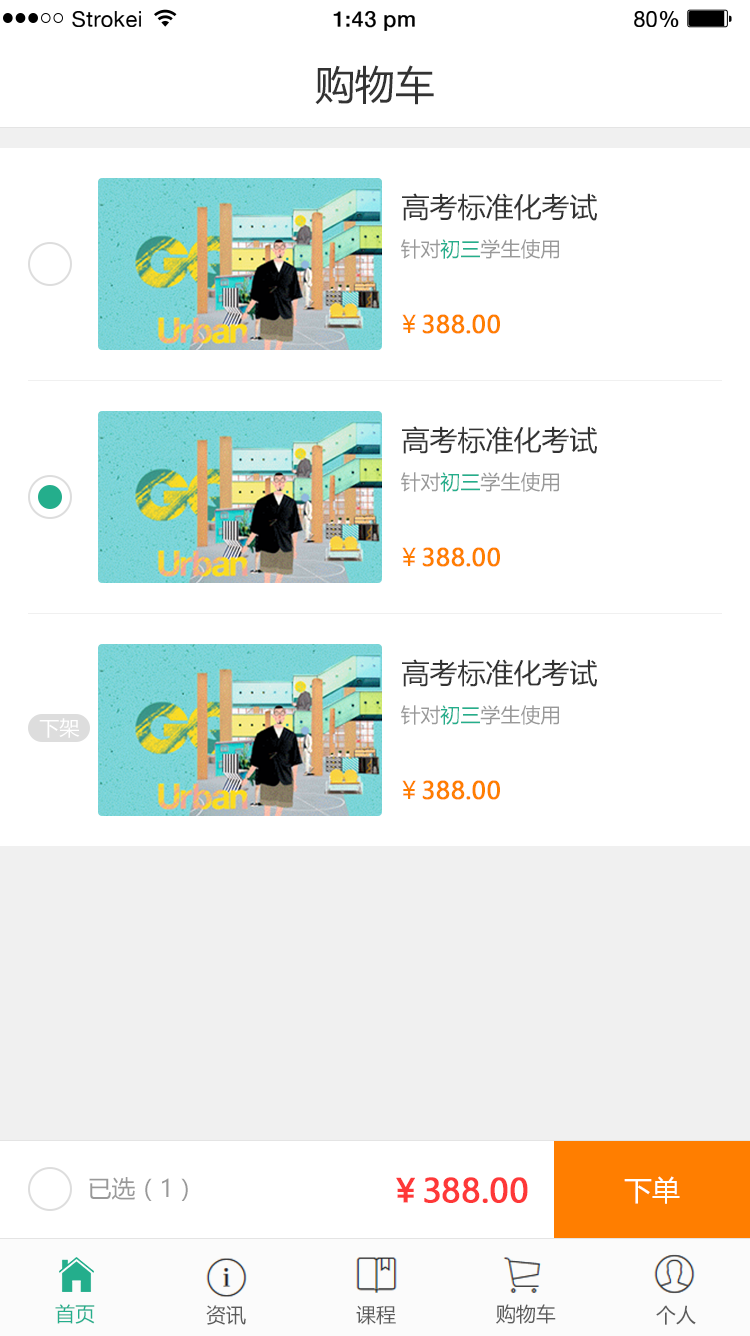
<style>
.page{position:relative;width:750px;height:1336px;background:#ffffff}
.page>*{position:absolute;margin:0}
.t1{font:21.8px "HelveticaNeue";letter-spacing:0.02em;color:#000000}
.t2{font:21.8px "HelveticaNeue-Medium";letter-spacing:0.02em;color:#000000}
.t3{font:40px "MicrosoftYaHei";color:#333333}
.t4{font:28px "MicrosoftYaHei";color:#333333}
.t5{font:20px "MicrosoftYaHei";color:#999999}
.t6{font:20px "MicrosoftYaHei";color:#24ae8c}
.t7{font:24px "MicrosoftYaHei";color:#ff7e00;font-weight:bold}
.t8{font:24px "MicrosoftYaHei";color:#ff7e00}
.t9{font:20px "MicrosoftYaHei";color:#ffffff}
.t10{font:24px "MicrosoftYaHei";color:#999999}
.t11{font:32px "MicrosoftYaHei";color:#fe3838;font-weight:bold}
.t12{font:28px "MicrosoftYaHei";color:#ffffff}
.t13{font:20px "MicrosoftYaHei";color:#5b5b5b}
</style>
<div class="page">
<p class="t1" style="left:72px;top:11px;width:69px;height:16px">Strokei</p>
<p class="t2" style="left:333px;top:11px;width:82px;height:20px">1:43 pm</p>
<p class="t1" style="left:634px;top:11px;width:45px;height:16px">80<span class="t2">%</span></p>
<p class="t3" style="left:315px;top:65px;width:119px;height:40px">购物车</p>
<p class="t4" style="left:402px;top:193px;width:195px;height:28px">高考标准化考试</p>
<p class="t5" style="left:401px;top:239px;width:158px;height:20px">针对<span class="t6">初三</span>学生使用</p>
<p class="t7" style="left:402px;top:314px;width:98px;height:20px"><span class="t8">￥</span>388.00</p>
<p class="t4" style="left:402px;top:426px;width:195px;height:28px">高考标准化考试</p>
<p class="t5" style="left:401px;top:472px;width:158px;height:20px">针对<span class="t6">初三</span>学生使用</p>
<p class="t7" style="left:402px;top:547px;width:98px;height:20px"><span class="t8">￥</span>388.00</p>
<p class="t4" style="left:402px;top:659px;width:195px;height:28px">高考标准化考试</p>
<p class="t5" style="left:401px;top:705px;width:158px;height:20px">针对<span class="t6">初三</span>学生使用</p>
<p class="t9" style="left:39px;top:718px;width:41px;height:20px">下架</p>
<p class="t7" style="left:402px;top:780px;width:98px;height:20px"><span class="t8">￥</span>388.00</p>
<p class="t10" style="left:89px;top:1177px;width:99px;height:24px">已选（1）</p>
<p class="t11" style="left:396px;top:1177px;width:132px;height:26px">￥388.00</p>
<p class="t12" style="left:624px;top:1176px;width:56px;height:28px">下单</p>
<p class="t6" style="left:55px;top:1304px;width:40px;height:20px">首页</p>
<p class="t13" style="left:206px;top:1305px;width:40px;height:20px">资讯</p>
<p class="t13" style="left:356px;top:1305px;width:40px;height:20px">课程</p>
<p class="t13" style="left:496px;top:1304px;width:60px;height:20px">购物车</p>
<p class="t13" style="left:656px;top:1305px;width:40px;height:20px">个人</p>
</div>
